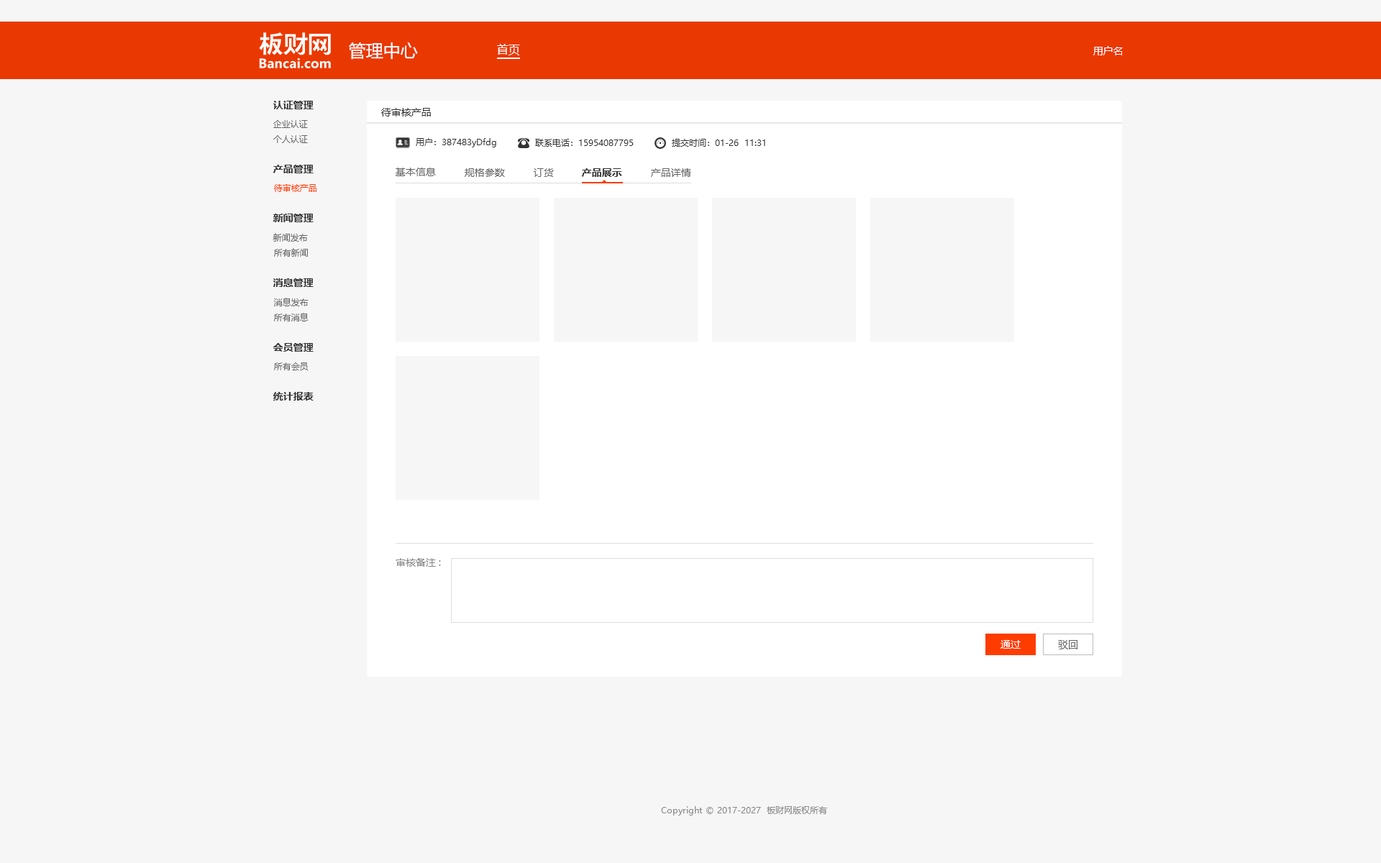
<style>
.page{position:relative;width:1381px;height:863px;background:#f6f6f6}
.page>*{position:absolute;margin:0}
.t1{font:17.3px "MicrosoftYaHei";color:#ffffff}
.t2{font:11.5px "MicrosoftYaHei";color:#ffffff}
.t3{font:10.1px "MicrosoftYaHei";color:#ffffff}
.t4{font:10.1px "MicrosoftYaHei-Bold";color:#333333}
.t5{font:10.1px "MicrosoftYaHei";color:#333333}
.t6{font:8.6px "MicrosoftYaHei";color:#666666}
.t7{font:8.6px "MicrosoftYaHei";color:#333333}
.t8{font:10.1px "MicrosoftYaHei";color:#666666}
.t9{font:8.6px "MicrosoftYaHei";color:#ff3c00}
.t10{font:10.1px "MicrosoftYaHei";color:#888888}
.t11{font:8.6px "MicrosoftYaHei";color:#888888}
</style>
<div class="page">
<p class="t1" style="left:349px;top:42px;width:69px;height:18px">管理中心</p>
<p class="t2" style="left:497px;top:44px;width:23px;height:11px">首页</p>
<p class="t3" style="left:1094px;top:46px;width:29px;height:9px">用户名</p>
<p class="t4" style="left:273px;top:101px;width:41px;height:8px">认证管理</p>
<p class="t5" style="left:381px;top:108px;width:50px;height:9px">待审核产品</p>
<p class="t6" style="left:273px;top:120px;width:35px;height:8px">企业认证</p>
<p class="t6" style="left:273px;top:135px;width:35px;height:8px">个人认证</p>
<p class="t7" style="left:416px;top:138px;width:80px;height:9px">用户：387483yDfdg</p>
<p class="t7" style="left:535px;top:139px;width:99px;height:8px">联系电话：15954087795</p>
<p class="t7" style="left:672px;top:139px;width:93px;height:8px">提交时间：01-26  11:31</p>
<p class="t4" style="left:273px;top:165px;width:41px;height:8px">产品管理</p>
<p class="t8" style="left:396px;top:168px;width:40px;height:8px">基本信息</p>
<p class="t8" style="left:465px;top:168px;width:40px;height:9px">规格参数</p>
<p class="t8" style="left:533px;top:168px;width:21px;height:9px">订货</p>
<p class="t4" style="left:581px;top:168px;width:41px;height:9px">产品展示</p>
<p class="t8" style="left:651px;top:168px;width:40px;height:9px">产品详情</p>
<p class="t9" style="left:274px;top:184px;width:43px;height:8px">待审核产品</p>
<p class="t4" style="left:273px;top:214px;width:41px;height:8px">新闻管理</p>
<p class="t6" style="left:273px;top:233px;width:35px;height:9px">新闻发布</p>
<p class="t6" style="left:274px;top:248px;width:34px;height:9px">所有新闻</p>
<p class="t4" style="left:273px;top:278px;width:41px;height:9px">消息管理</p>
<p class="t6" style="left:274px;top:298px;width:35px;height:8px">消息发布</p>
<p class="t6" style="left:274px;top:313px;width:35px;height:9px">所有消息</p>
<p class="t4" style="left:273px;top:343px;width:41px;height:9px">会员管理</p>
<p class="t6" style="left:274px;top:363px;width:35px;height:7px">所有会员</p>
<p class="t4" style="left:273px;top:392px;width:41px;height:9px">统计报表</p>
<p class="t10" style="left:396px;top:558px;width:45px;height:9px">审核备注:</p>
<p class="t3" style="left:1001px;top:640px;width:20px;height:9px">通过</p>
<p class="t8" style="left:1058px;top:640px;width:20px;height:10px">驳回</p>
<p class="t11" style="left:661px;top:806px;width:166px;height:10px">Copyright © 2017-2027  板财网版权所有</p>
</div>
